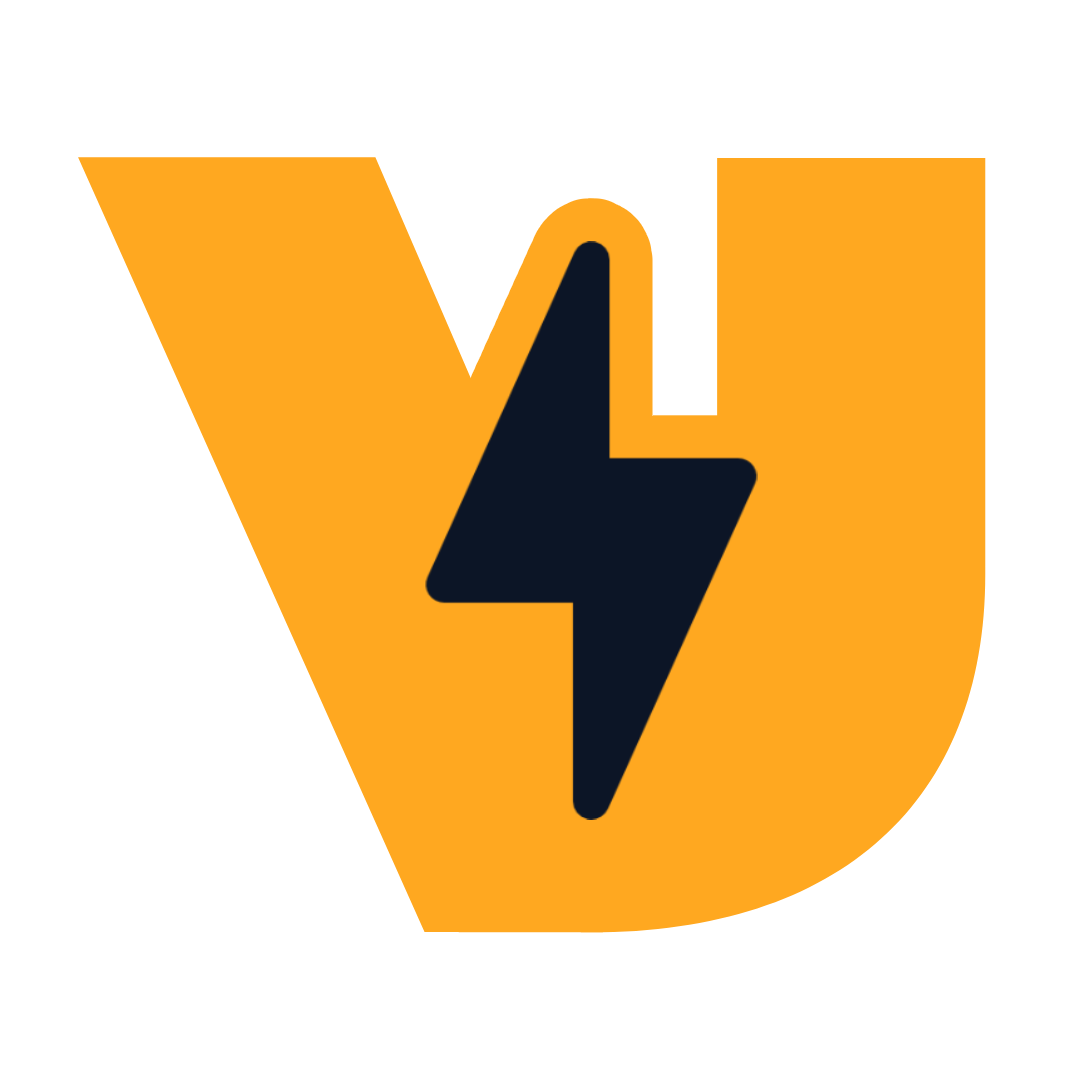
<style>
.page{position:relative;width:1080px;height:1080px;background:#ffffff}
.page>*{position:absolute;margin:0}
.t1{font:1106.7px "Montserrat-Black";color:#ffa820;scale:1.06 1}
.t2{font:1081.3px "Montserrat-Black";color:#ffa820;scale:1.07 1}
</style>
<div class="page">
<p class="t1" style="left:78px;top:157px;width:965px;height:775px">V</p>
<p class="t2" style="left:197px;top:158px;width:789px;height:775px">U</p>
</div>
